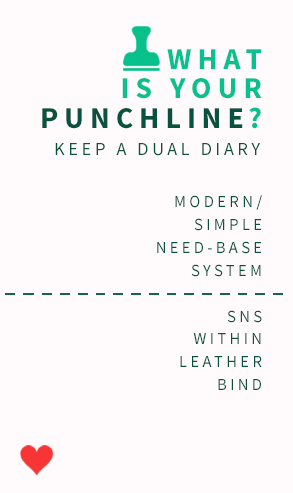
<style>
.page{position:relative;width:293px;height:493px;background:#fffafb}
.page>*{position:absolute;margin:0}
.t1{font:30px/29.1px "SourceSansPro-Bold";letter-spacing:0.2em;color:#09c18d;text-transform:uppercase}
.t2{font:30px "SourceSansPro-Bold";letter-spacing:0.2em;color:#09533e;text-transform:uppercase}
.t3{font:18.3px "SourceSansPro-Regular";letter-spacing:0.2em;color:#09533e;text-transform:uppercase}
.t4{font:16.7px/22.9px "SourceSansPro-Regular";letter-spacing:0.2em;color:#09533e;text-transform:uppercase}
</style>
<div class="page">
<p class="t1" style="left:122px;top:49px;width:140px;height:80px;text-align:right">What <br>is your        ?</p>
<p class="t2" style="left:42px;top:108px;width:201px;height:21px">punchline</p>
<p class="t3" style="left:55px;top:143px;width:205px;height:13px">keep a dual diary</p>
<p class="t4" style="left:157px;top:195px;width:105px;height:195px;text-align:right">modern/<br>simple<br>need-base<br>system<br><br>sns<br>within <br>leather<br>bind</p>
</div>
